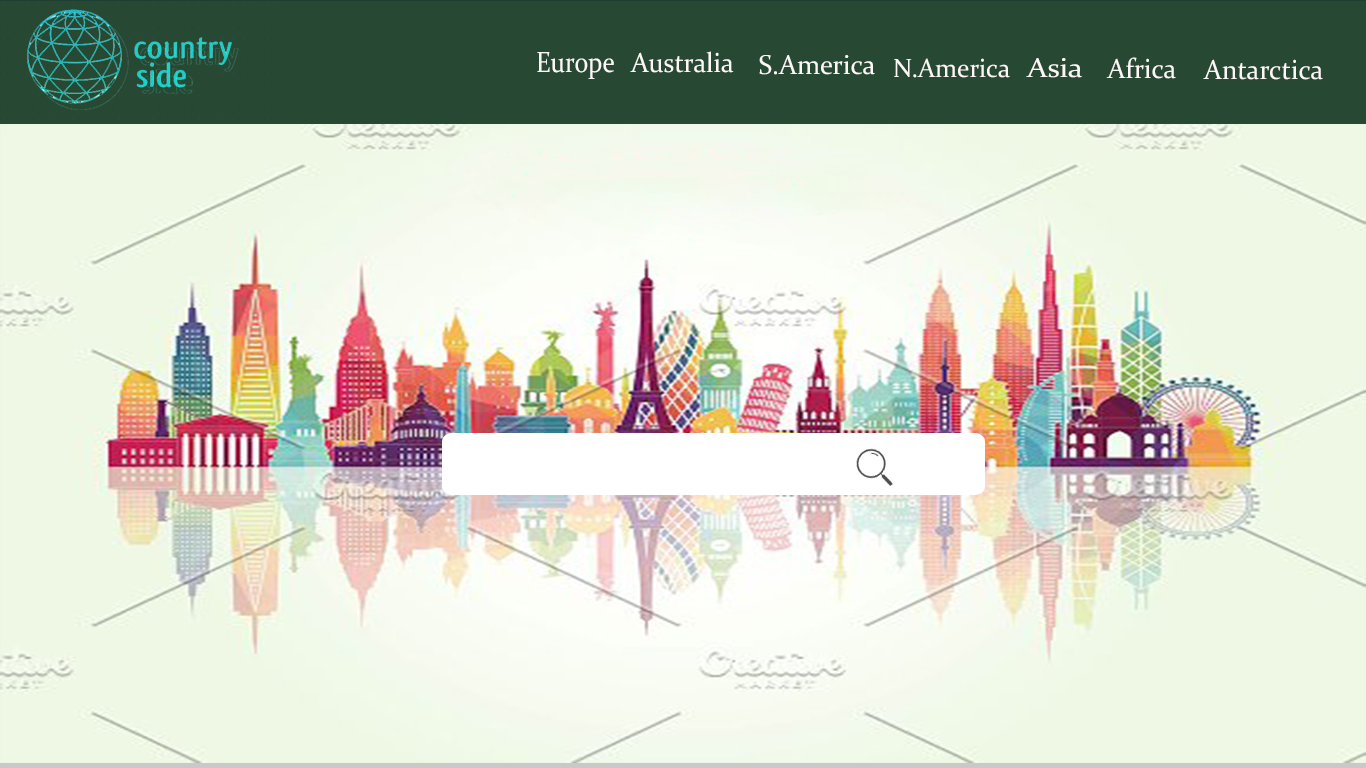
<style>
.page{position:relative;width:1366px;height:768px;background:#eff8e5}
.page>*{position:absolute;margin:0}
.t1{font:29.3px "Constantia";color:#fcf7f7;scale:0.87 1}
.t2{font:27.8px "Constantia";color:#fcf7f7;scale:0.95 1}
.t3{font:27.5px "Constantia";color:#fcf7f7;scale:0.97 1}
.t4{font:26.5px "Constantia";color:#fcf7f7;scale:0.96 1}
.t5{font:27.5px "Constantia";color:#fcf7f7;scale:1.11 1}
</style>
<div class="page">
<p class="t1" style="left:537px;top:52px;width:77px;height:27px">Europe</p>
<p class="t2" style="left:630px;top:51px;width:104px;height:22px">Australia</p>
<p class="t3" style="left:759px;top:55px;width:116px;height:20px">S.America</p>
<p class="t4" style="left:894px;top:58px;width:116px;height:20px">N.America</p>
<p class="t5" style="left:1026px;top:58px;width:56px;height:20px">Asia</p>
<p class="t2" style="left:1106px;top:57px;width:70px;height:22px">Africa</p>
<p class="t2" style="left:1203px;top:59px;width:120px;height:21px">Antarctica</p>
</div>
